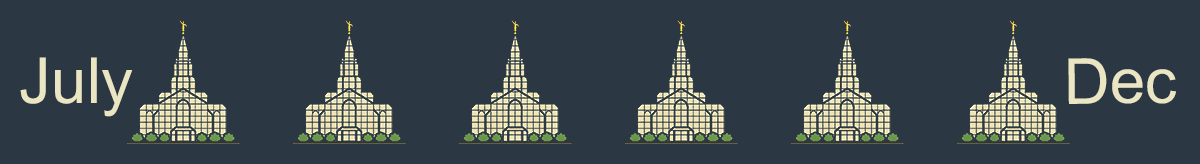
<style>
.page{position:relative;width:1200px;height:164px;background:#2b3743}
.page>*{position:absolute;margin:0}
.t1{font:63.5px "ArialMT";color:#e8deb5}
</style>
<div class="page">
<p class="t1" style="left:20px;top:57px;width:113px;height:60px">July</p>
<p class="t1" style="left:1068px;top:58px;width:108px;height:46px;rotate:-1deg">Dec</p>
</div>
